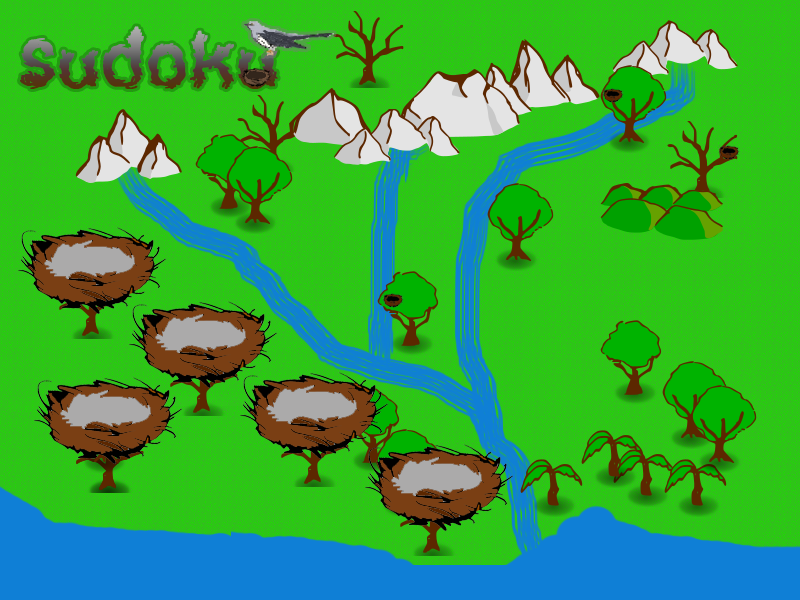
<style>
.page{position:relative;width:800px;height:600px;background:#2ec418}
.page>*{position:absolute;margin:0}
.t1{font:85px "TOBACCO";font-weight:bold}
</style>
<div class="page">
<p class="t1" style="left:20px;top:26px;width:258px;height:63px">sudoku</p>
</div>
